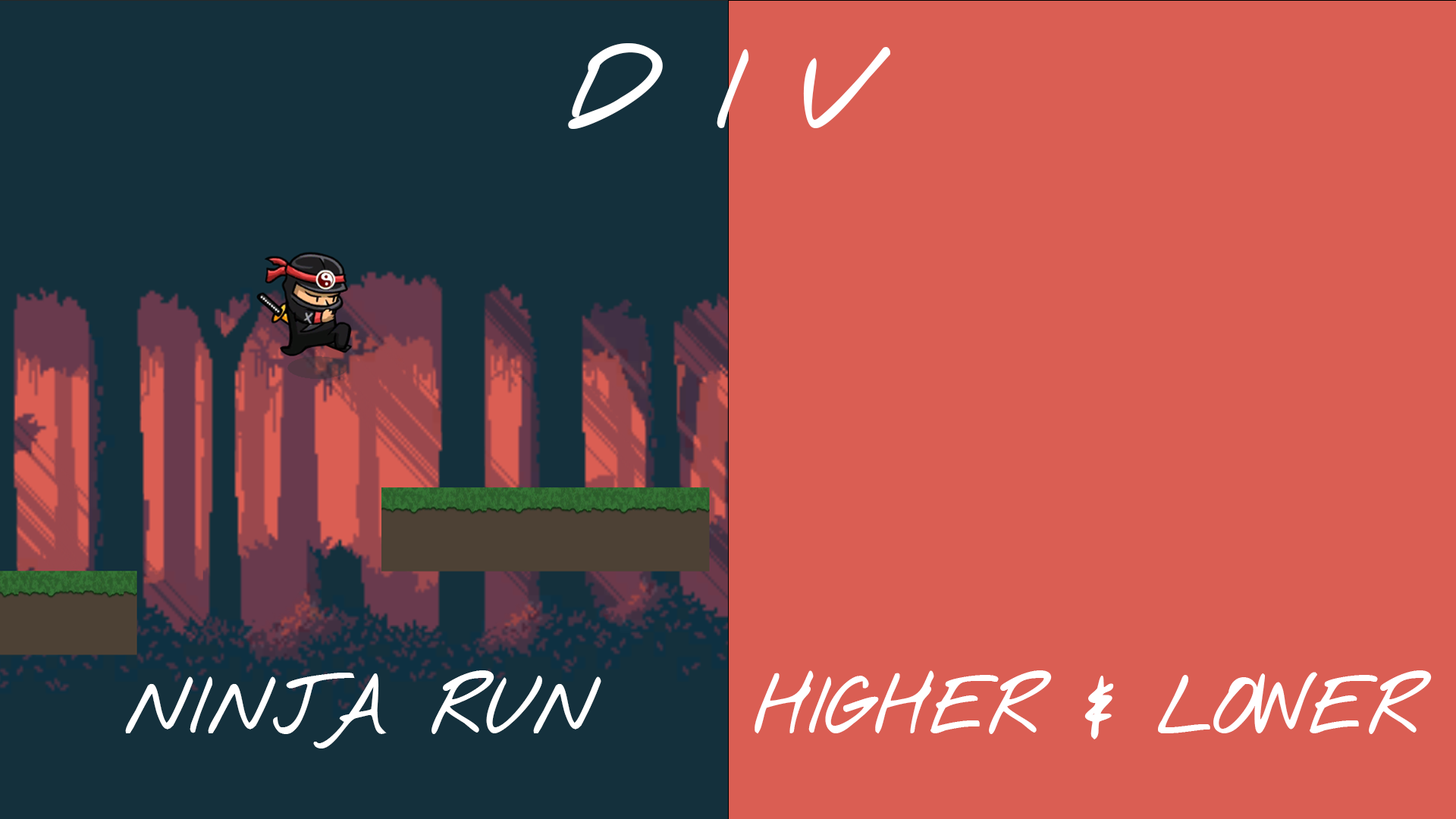
<style>
.page{position:relative;width:1456px;height:819px;background:#da5e53}
.page>*{position:absolute;margin:0}
.t1{font:91px "NothingYouCouldDoBold";color:#ffffff}
.t2{font:64.5px "NothingYouCouldDoBold";color:#ffffff}
</style>
<div class="page">
<p class="t1" style="left:568px;top:43px;width:322px;height:86px">D I V</p>
<p class="t2" style="left:125px;top:670px;width:476px;height:78px">NINJA RUN</p>
<p class="t2" style="left:755px;top:670px;width:677px;height:69px">HIGHER &amp; LOWER</p>
</div>
